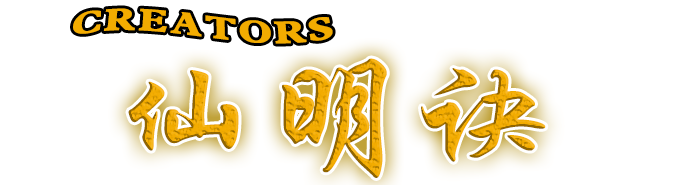
<style>
.page{position:relative;width:700px;height:185px;background:#ffffff}
.page>*{position:absolute;margin:0}
.t1{font:35.6px "DFPLiJinHeiW8";color:#f3ac00;scale:1.46 1}
.t2{font:84.6px "STXingkai";scale:1.74 1}
</style>
<div class="page">
<p class="t1" style="left:73px;top:8px;width:260px;height:36px">CREATORS</p>
<p class="t2" style="left:128px;top:58px;width:418px;height:120px">仙明诀</p>
</div>
